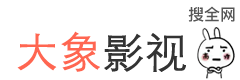
<style>
.page{position:relative;width:240px;height:80px;background:#ffffff}
.page>*{position:absolute;margin:0}
.t1{font:16px "PingFang-SC-Bold";color:#555555}
.t2{font:42px "STXihei";color:#ff6651;font-weight:bold}
.t3{font:42px "STXihei";color:#333333;font-weight:bold}
</style>
<div class="page">
<p class="t1" style="left:188px;top:6px;width:47px;height:16px">搜全网</p>
<p class="t2" style="left:17px;top:31px;width:169px;height:41px">大象<span class="t3">影视</span></p>
</div>
